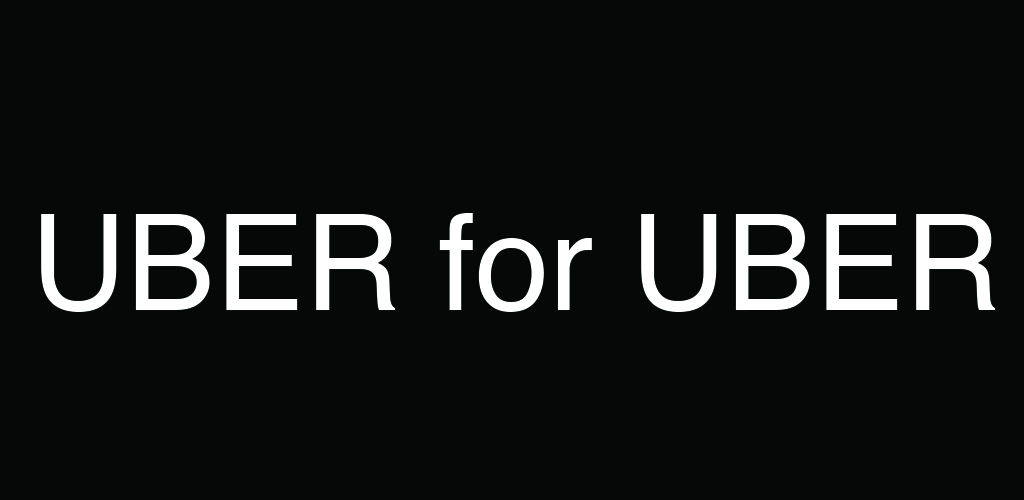
<style>
.page{position:relative;width:1024px;height:500px;background:#060808}
.page>*{position:absolute;margin:0}
.t1{font:133.3px "Helvetica";color:#ffffff}
</style>
<div class="page">
<p class="t1" style="left:41px;top:213px;width:955px;height:99px">UBER for UBER</p>
</div>
